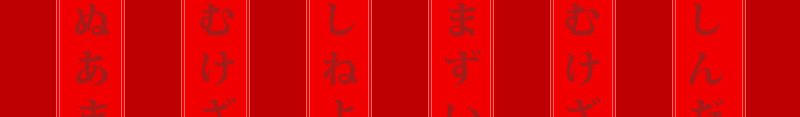
<style>
.page{position:relative;width:800px;height:117px;background:#bf0000}
.page>*{position:absolute;margin:0}
.t1{font:39px "KozMinPr6N-Heavy";color:#a71a1a}
</style>
<div class="page">
<p class="t1" style="left:75px;top:3px;width:34px;height:33px">ぬ</p>
<p class="t1" style="left:200px;top:3px;width:35px;height:33px">む</p>
<p class="t1" style="left:326px;top:3px;width:29px;height:33px">し</p>
<p class="t1" style="left:447px;top:2px;width:30px;height:35px">ま</p>
<p class="t1" style="left:565px;top:3px;width:35px;height:33px">む</p>
<p class="t1" style="left:692px;top:3px;width:29px;height:33px">し</p>
<p class="t1" style="left:76px;top:51px;width:32px;height:36px">あ</p>
<p class="t1" style="left:201px;top:51px;width:34px;height:35px">け</p>
<p class="t1" style="left:323px;top:51px;width:35px;height:35px">ね</p>
<p class="t1" style="left:444px;top:49px;width:37px;height:37px">ず</p>
<p class="t1" style="left:566px;top:51px;width:34px;height:35px">け</p>
<p class="t1" style="left:689px;top:52px;width:35px;height:33px">ん</p>
</div>
